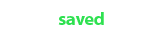
<style>
.page{position:relative;width:159px;height:38px;background:#ffffff}
.page>*{position:absolute;margin:0}
.t1{font:18px "MyriadPro-Bold";color:#2ee150}
</style>
<div class="page">
<p class="t1" style="left:58px;top:12px;width:46px;height:13px">saved</p>
</div>
